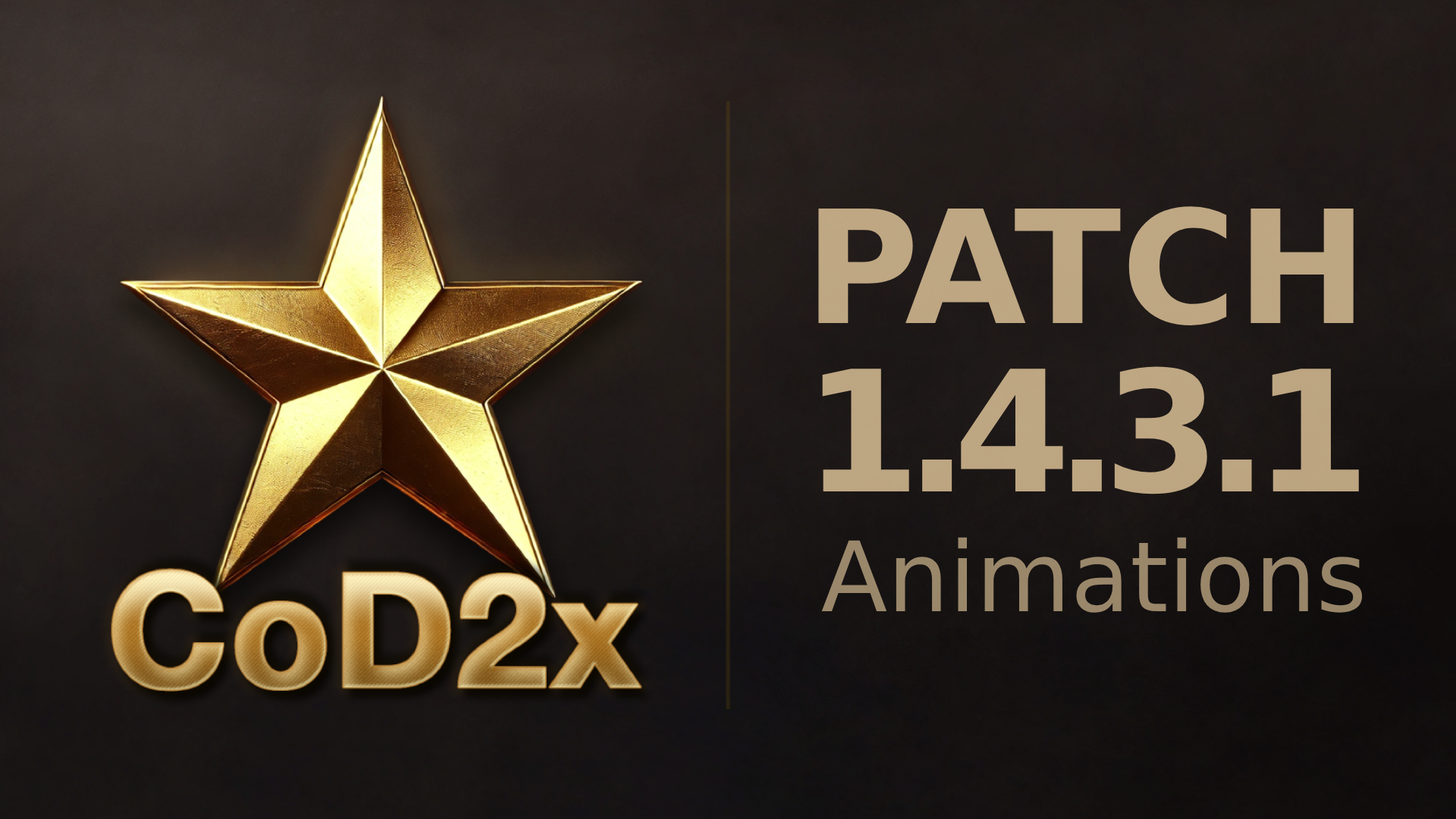
<style>
.page{position:relative;width:1456px;height:819px}
.page>*{position:absolute;margin:0}
.t1{font:157px "DejaVuSans-Bold";color:#bea783}
.t2{font:168.1px "DejaVuSans-Bold";letter-spacing:-0.092em;color:#bda682}
.t3{font:97.1px "DejaVuSans";color:#9a876a}
</style>
<div class="page">
<p class="t1" style="left:818px;top:206px;width:536px;height:119px">PATCH</p>
<p class="t2" style="left:822px;top:366px;width:537px;height:128px">1.4.3.1</p>
<p class="t3" style="left:821px;top:537px;width:542px;height:76px">Animations</p>
</div>
